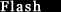
<style>
.page{position:relative;width:61px;height:12px;background:#000000}
.page>*{position:absolute;margin:0}
.t1{font:14px "Georgia";letter-spacing:0.1em;color:#ffffff;font-weight:bold}
</style>
<div class="page">
<p class="t1" style="left:0px;top:0px;width:41px;height:12px">Flash</p>
</div>
